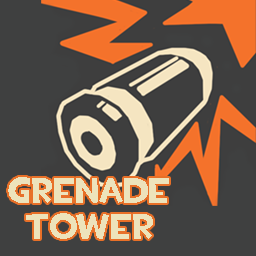
<style>
.page{position:relative;width:256px;height:256px;background:#3f4040}
.page>*{position:absolute;margin:0}
.t1{font:36px/36px "TF2Build";color:#ede3bb}
</style>
<div class="page">
<p class="t1" style="left:8px;top:177px;width:161px;height:62px;text-align:center">GRenade<br>Tower</p>
</div>
